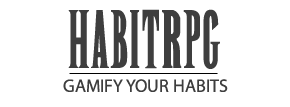
<style>
.page{position:relative;width:290px;height:107px;background:#ffffff}
.page>*{position:absolute;margin:0}
.t1{font:60px "New";color:#3e3e3e}
.t2{font:18px "MyriadPro-Regular";color:#3e3e3e}
</style>
<div class="page">
<p class="t1" style="left:68px;top:9px;width:152px;height:60px">HABITRPG</p>
<p class="t2" style="left:63px;top:79px;width:165px;height:13px">GAMIFY YOUR HABITS</p>
</div>
